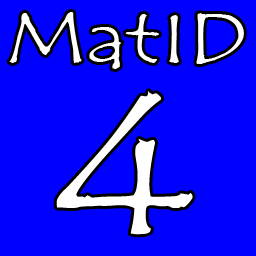
<style>
.page{position:relative;width:256px;height:256px;background:#0000ff}
.page>*{position:absolute;margin:0}
.t1{font:70.8px/170px "TempusSansITC";color:#ffffff;scale:1.31 1}
.t2{font:200px/170px "TempusSansITC";color:#ffffff;scale:1.31 1}
</style>
<div class="page">
<p class="t1" style="left:9px;top:12px;width:235px;height:223px;text-align:center">MatID<br><span class="t2">4</span></p>
</div>
